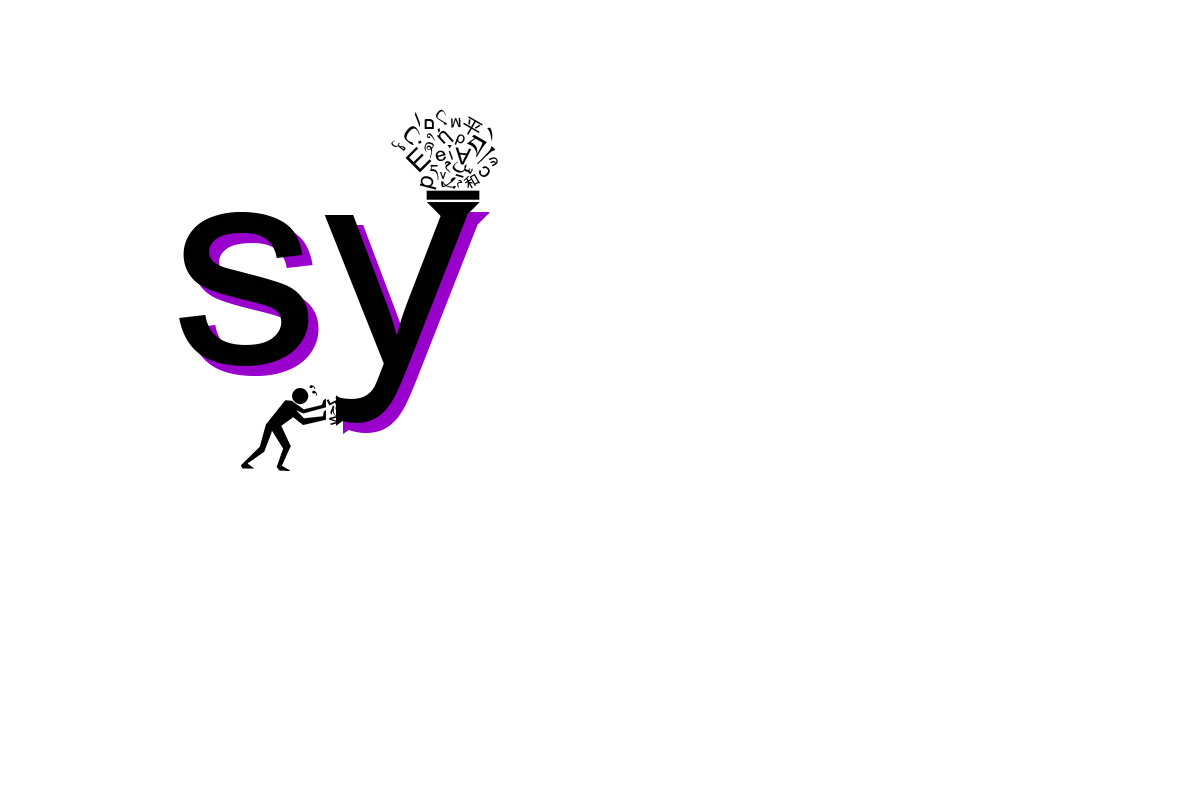
<style>
.page{position:relative;width:1200px;height:800px;background:#ffffff}
.page>*{position:absolute;margin:0}
.t1{font:25.4px "ArialMT";color:#000000;scale:1.14 1}
.t2{font:19.6px "ArialMT";color:#000000;scale:1.05 1}
.t3{font:30.4px "ArialMT";color:#000000;scale:1.06 1}
.t4{font:19.4px "ArialMT";color:#000000;scale:1.03 1}
.t5{font:12.5px "ArialMT";color:#000000;scale:1.05 1}
.t6{font:18.7px "KozGoPr6N-Regular";color:#000000;scale:1.05 1}
.t7{font:19.1px "Kailasa";color:#000000}
.t8{font:20.9px "ArialMT";color:#000000;scale:1.05 1}
.t9{font:15.9px "ArialMT";color:#000000}
.t10{font:34.2px "Kailasa";color:#000000;scale:1.05 1}
.t11{font:28.5px "Kailasa";color:#000000;scale:1.05 1}
.t12{font:12.7px "ArialMT";color:#000000;scale:1.08 1}
.t13{font:28.5px "ArialMT";color:#000000;scale:1.05 1}
.t14{font:19px "ArialMT";color:#000000;scale:1.05 1}
.t15{font:17px "ArialMT";color:#000000;scale:0.84 1}
.t16{font:22.6px "ArialMT";color:#000000;scale:1.04 1}
.t17{font:22.8px "ArialMT";color:#000000;scale:1.05 1}
.t18{font:13px "ArialMT";color:#000000;scale:1.05 1}
.t19{font:19px "Kailasa";color:#000000;scale:1.05 1}
.t20{font:12.7px "ArialMT";color:#000000;scale:0.95 1}
.t21{font:14.9px "ArialMT";color:#000000;scale:1.18 1}
.t22{font:13.1px "KozGoPr6N-Regular";color:#000000;scale:1.1 1}
.t23{font:19.8px "ArialMT";color:#000000;scale:1.06 1}
.t24{font:23.2px "ArialMT";color:#000000;scale:1.04 1}
.t25{font:14.4px "ArialMT";color:#000000}
.t26{font:285px "ArialMT";color:#010100;scale:1.05 1}
.t27{font:285px "ArialMT";scale:1.05 1}
.t28{font:19.9px "ArialMT";color:#000000}
.t29{font:19.5px "ArialMT";color:#000000}
.t30{font:21.1px "ArialMT";color:#000000}
.t31{font:15.5px "ArialMT";color:#000000;scale:1.09 1}
</style>
<div class="page">
<p class="t1" style="left:414px;top:112px;width:6px;height:15px;rotate:-15deg">ا</p>
<p class="t2" style="left:436px;top:109px;width:12px;height:16px;rotate:131deg">ل</p>
<p class="t3" style="left:404px;top:126px;width:18px;height:19px;rotate:132deg">ن</p>
<p class="t4" style="left:424px;top:119px;width:10px;height:10px">ם</p>
<p class="t5" style="left:451px;top:117px;width:10px;height:11px;rotate:177deg">М</p>
<p class="t6" style="left:463px;top:116px;width:20px;height:19px;rotate:30deg">平</p>
<p class="t7" style="left:424px;top:133px;width:11px;height:25px;rotate:15deg">ཞི</p>
<p class="t8" style="left:436px;top:127px;width:18px;height:17px;rotate:-42deg">ή</p>
<p class="t9" style="left:454px;top:134px;width:11px;height:11px;rotate:21deg">ρ</p>
<p class="t10" style="left:467px;top:134px;width:20px;height:23px;rotate:30deg">བ</p>
<p class="t11" style="left:477px;top:127px;width:19px;height:38px;rotate:45deg">ེ།</p>
<p class="t12" style="left:391px;top:140px;width:15px;height:11px;rotate:38deg">ص</p>
<p class="t13" style="left:405px;top:146px;width:27px;height:27px;rotate:-45deg">E</p>
<p class="t14" style="left:435px;top:150px;width:11px;height:12px;rotate:-14deg">e</p>
<p class="t11" style="left:447px;top:145px;width:5px;height:4px">་</p>
<p class="t15" style="left:448px;top:150px;width:5px;height:10px;rotate:-21deg">ι</p>
<p class="t16" style="left:455px;top:147px;width:17px;height:18px;rotate:-174deg">A</p>
<p class="t8" style="left:444px;top:161px;width:8px;height:12px;rotate:-30deg">م</p>
<p class="t17" style="left:452px;top:161px;width:21px;height:13px;rotate:30deg">س</p>
<p class="t18" style="left:489px;top:157px;width:9px;height:10px;rotate:-115deg">ש</p>
<p class="t19" style="left:430px;top:164px;width:9px;height:16px">ད</p>
<p class="t20" style="left:440px;top:172px;width:6px;height:7px">ν</p>
<p class="t21" style="left:455px;top:174px;width:9px;height:4px;rotate:-76deg">ו</p>
<p class="t22" style="left:463px;top:174px;width:17px;height:15px;rotate:-30deg">和</p>
<p class="t23" style="left:478px;top:166px;width:12px;height:11px;rotate:-135deg">c</p>
<p class="t24" style="left:419px;top:176px;width:18px;height:14px;rotate:-75deg">p</p>
<p class="t17" style="left:441px;top:177px;width:15px;height:12px;rotate:88deg">لا</p>
<p class="t25" style="left:457px;top:180px;width:6px;height:8px">م</p>
<p class="t26" style="left:179px;top:212px;width:289px;height:211px">sy</p>
<p class="t27" style="left:189px;top:222px;width:289px;height:211px">sy</p>
<p class="t28" style="left:309px;top:385px;width:7px;height:5px;rotate:119deg">،</p>
<p class="t29" style="left:312px;top:390px;width:5px;height:6px;rotate:143deg">،</p>
<p class="t30" style="left:326px;top:399px;width:13px;height:13px;rotate:-27deg">ל</p>
<p class="t31" style="left:329px;top:416px;width:10px;height:9px;rotate:76deg">и</p>
</div>
